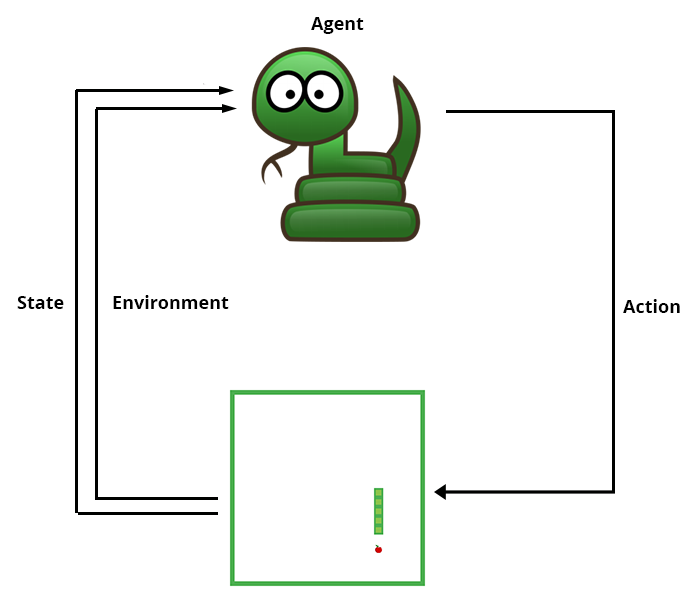
<style>
.page{position:relative;width:700px;height:594px;background:#ffffff}
.page>*{position:absolute;margin:0}
.t1{font:18px "OpenSans-Bold";color:#000000}
</style>
<div class="page">
<p class="t1" style="left:311px;top:17px;width:53px;height:17px">Agent</p>
<p class="t1" style="left:17px;top:296px;width:47px;height:13px">State</p>
<p class="t1" style="left:113px;top:295px;width:116px;height:14px">Environment</p>
<p class="t1" style="left:623px;top:299px;width:57px;height:14px">Action</p>
</div>
